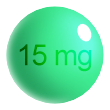
<style>
.page{position:relative;width:110px;height:110px;background:#ffffff}
.page>*{position:absolute;margin:0}
.t1{font:29.3px "ArialMT";letter-spacing:-0.04em}
</style>
<div class="page">
<p class="t1" style="left:19px;top:44px;width:73px;height:28px">15 mg</p>
</div>
